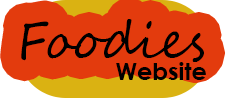
<style>
.page{position:relative;width:226px;height:98px;background:#e33b0d}
.page>*{position:absolute;margin:0}
.t1{font:49.8px "SegoeScript";color:#000000}
.t2{font:23.9px "CenturyGothic-Bold";color:#000000}
</style>
<div class="page">
<p class="t1" style="left:21px;top:19px;width:183px;height:43px">Foodies</p>
<p class="t2" style="left:116px;top:62px;width:90px;height:18px">Website</p>
</div>
